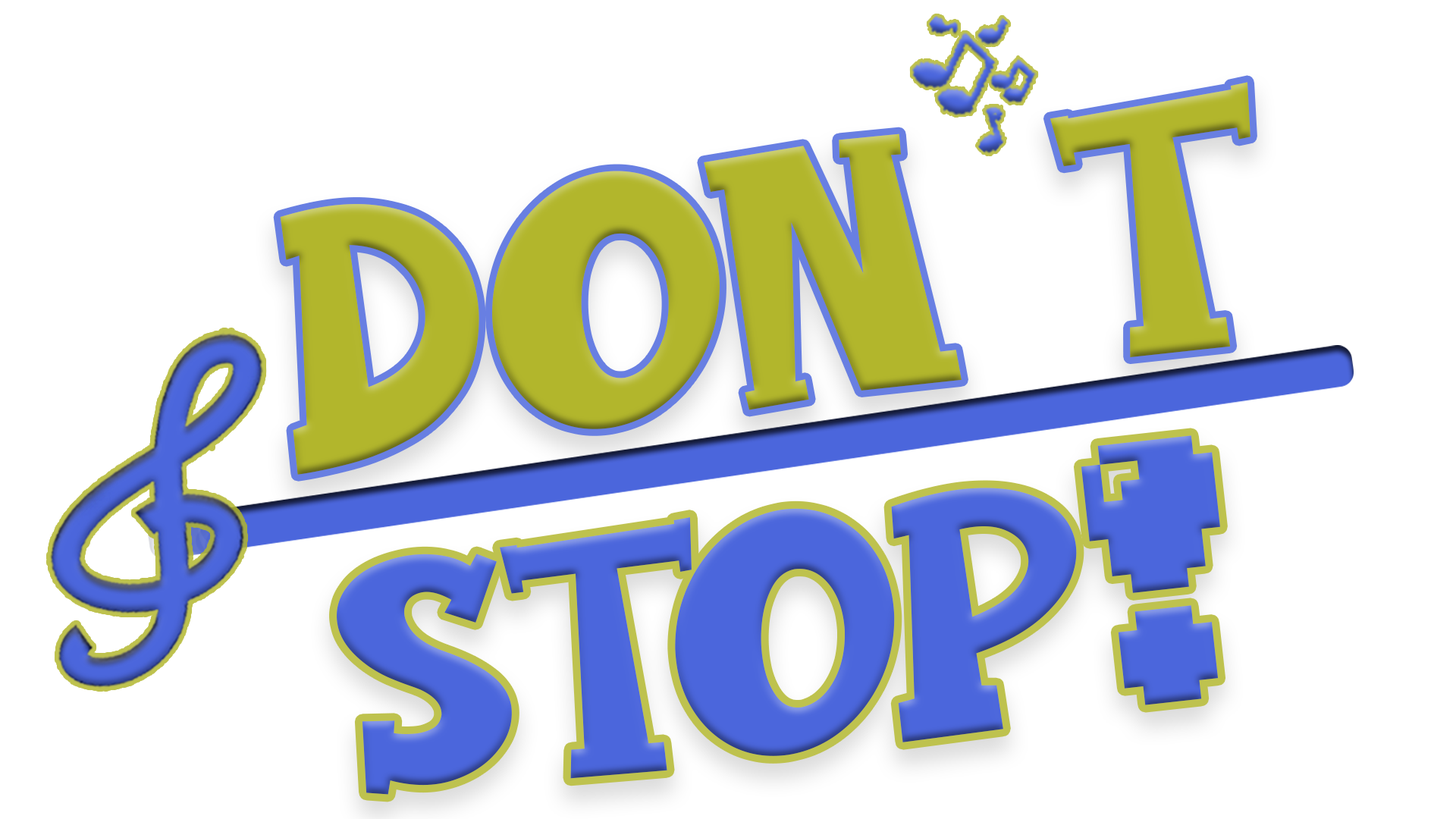
<style>
.page{position:relative;width:1456px;height:819px;background:#ffffff}
.page>*{position:absolute;margin:0}
.t1{font:332.2px "MagicBroom";color:#b2b62c}
.t2{font:318.8px "MagicBroom";color:#4b66dc}
.t3{font:318.8px "04b30";color:#4b66dc}
</style>
<div class="page">
<p class="t1" style="left:280px;top:82px;width:970px;height:393px;rotate:-8deg">Don’t</p>
<p class="t2" style="left:337px;top:435px;width:883px;height:360px;rotate:-6deg">STOP<span class="t3">!</span></p>
</div>
